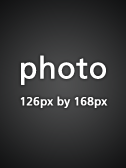
<style>
.page{position:relative;width:126px;height:168px}
.page>*{position:absolute;margin:0}
.t1{font:30px "FrutigerLT-Roman";color:#ffffff;font-weight:bold}
.t2{font:11.5px "FrutigerLT-Roman";color:#ffffff;font-weight:bold}
</style>
<div class="page">
<p class="t1" style="left:21px;top:55px;width:85px;height:30px">photo</p>
<p class="t2" style="left:20px;top:96px;width:88px;height:12px">126px by 168px</p>
</div>
